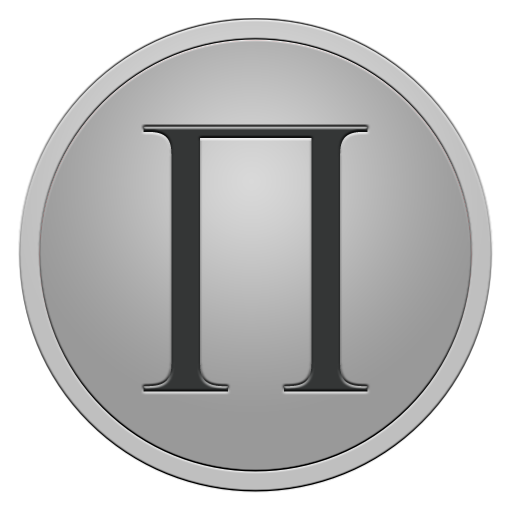
<style>
.page{position:relative;width:512px;height:512px;background:#ffffff}
.page>*{position:absolute;margin:0}
.t1{font:288px "Baskerville";color:#343636}
</style>
<div class="page">
<p class="t1" style="left:143px;top:126px;width:225px;height:266px">∏</p>
</div>
